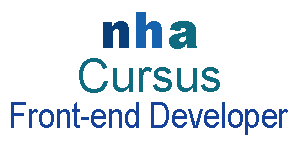
<style>
.page{position:relative;width:300px;height:150px;background:#ffffff}
.page>*{position:absolute;margin:0}
.t1{font:50px "Arial-Black";color:#0a3e78}
.t2{font:50px "Arial-Black";color:#1762ae}
.t3{font:50px "Arial-Black";color:#0f6c80}
.t4{font:45.8px "ArialMT";color:#0f6c80}
.t5{font:37.5px "ArialNarrow";color:#16429a}
</style>
<div class="page">
<p class="t1" style="left:103px;top:12px;width:94px;height:37px">n<span class="t2">h</span><span class="t3">a</span></p>
<p class="t4" style="left:79px;top:58px;width:141px;height:35px">Cursus</p>
<p class="t5" style="left:11px;top:102px;width:277px;height:33px">Front-end Developer</p>
</div>
